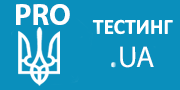
<style>
.page{position:relative;width:180px;height:90px;background:#0a8fbc}
.page>*{position:absolute;margin:0}
.t1{font:30px "MyriadPro-Bold";color:#ffffff}
.t2{font:30px "MyriadPro-Regular";color:#ffffff}
</style>
<div class="page">
<p class="t1" style="left:16px;top:4px;width:54px;height:21px">PRO</p>
<p class="t2" style="left:120px;top:46px;width:34px;height:22px">UA</p>
</div>
